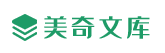
<style>
.page{position:relative;width:165px;height:53px;background:#ffffff}
.page>*{position:absolute;margin:0}
.t1{font:23px "35--Regular";letter-spacing:0.2em;color:#1e9b67}
</style>
<div class="page">
<p class="t1" style="left:44px;top:16px;width:106px;height:23px">美奇文库</p>
</div>
